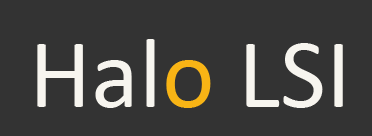
<style>
.page{position:relative;width:372px;height:136px;background:#333333}
.page>*{position:absolute;margin:0}
.t1{font:100px "Calibri";color:#f7f5ef}
.t2{font:100px "Calibri";color:#f8b415}
</style>
<div class="page">
<p class="t1" style="left:37px;top:39px;width:306px;height:69px">Hal<span class="t2">o </span>LSI</p>
</div>
